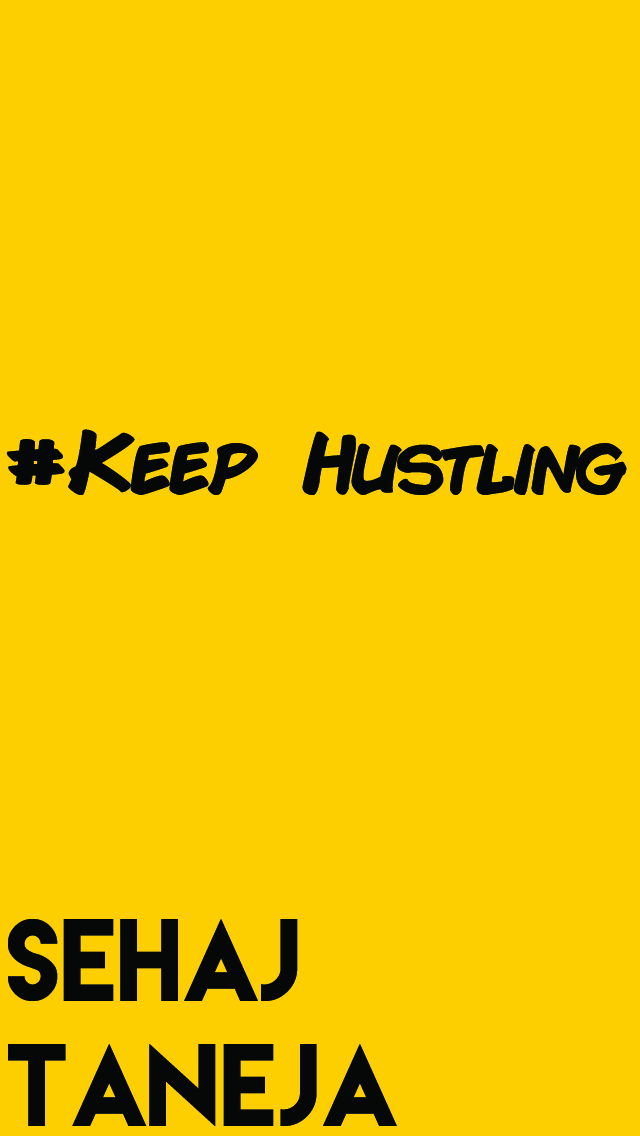
<style>
.page{position:relative;width:640px;height:1136px;background:#fecf00}
.page>*{position:absolute;margin:0}
.t1{font:83.3px "ComicBook-Bold";color:#060808}
.t2{font:104.2px "LemonMilk";color:#060808}
</style>
<div class="page">
<p class="t1" style="left:6px;top:429px;width:621px;height:66px">#Keep Hustling</p>
<p class="t2" style="left:8px;top:919px;width:389px;height:207px">sehaj taneja</p>
</div>
